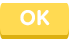
<style>
.page{position:relative;width:69px;height:40px;background:#ffda52}
.page>*{position:absolute;margin:0}
.t1{font:22px "Linotte-Bold";color:#ffffff}
</style>
<div class="page">
<p class="t1" style="left:20px;top:10px;width:30px;height:16px">OK</p>
</div>
